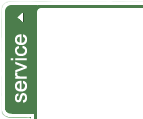
<style>
.page{position:relative;width:143px;height:119px;background:#ffffff}
.page>*{position:absolute;margin:0}
.t1{font:22px "ArialMT";color:#ffffff}
</style>
<div class="page">
<p class="t1" style="left:10px;top:34px;width:17px;height:69px;rotate:-90deg">service</p>
</div>
